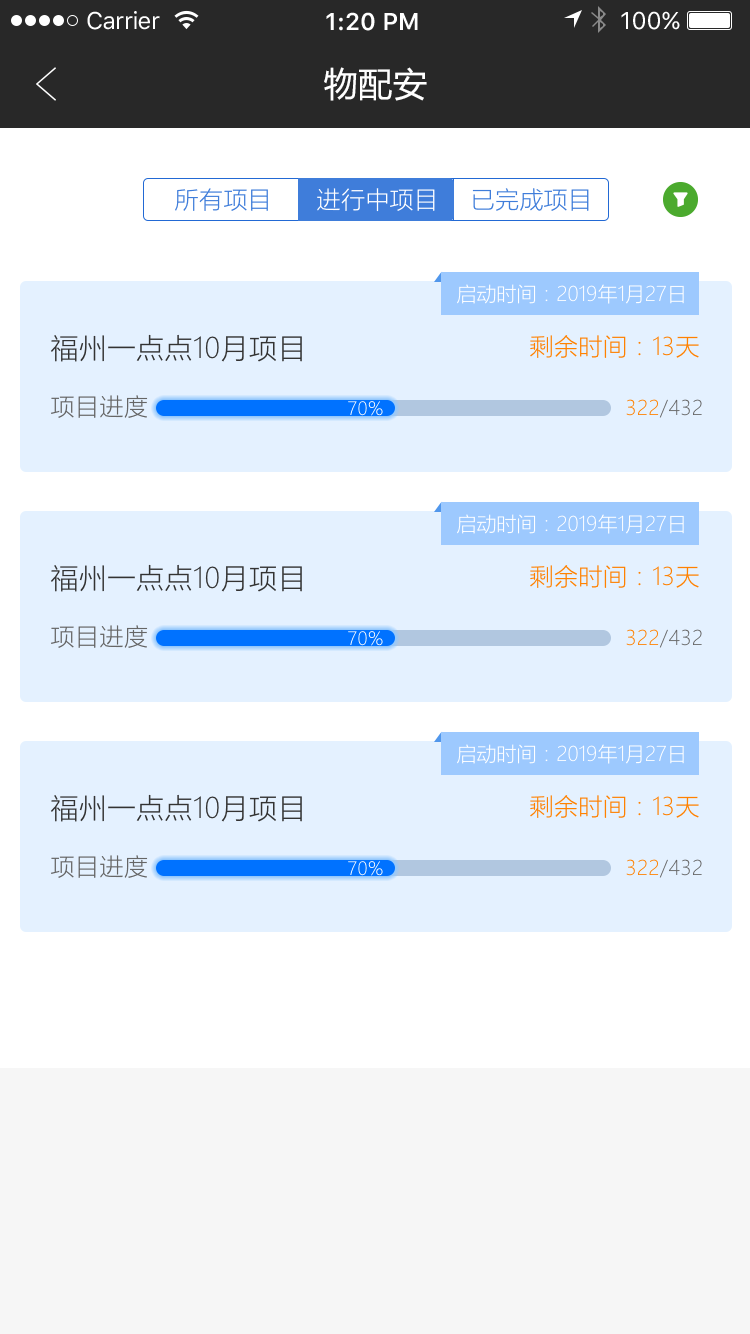
<style>
.page{position:relative;width:750px;height:1334px;background:#e4f1ff}
.page>*{position:absolute;margin:0}
.t1{font:24px "SFUIText-Regular";letter-spacing:-0.025em;color:#ffffff}
.t2{font:24px "SFUIText-Semibold";color:#ffffff}
.t3{font:24px "SFUIText-Regular";color:#ffffff}
.t4{font:34px "MicrosoftYaHei";letter-spacing:0.02em;color:#ffffff}
.t5{font:24px "MicrosoftYaHeiLight";letter-spacing:0.02em;color:#3f7dda}
.t6{font:24px "MicrosoftYaHeiLight";letter-spacing:0.02em;color:#ffffff}
.t7{font:20px "MicrosoftYaHeiLight";color:#ffffff}
.t8{font:28px "MicrosoftYaHeiLight";letter-spacing:0.02em;color:#333333}
.t9{font:24px "MicrosoftYaHeiLight";letter-spacing:0.02em;color:#ff8100}
.t10{font:24px "MicrosoftYaHeiLight";letter-spacing:0.02em;color:#666666}
.t11{font:18px "MicrosoftYaHeiLight";letter-spacing:0.02em}
.t12{font:20px "MicrosoftYaHeiLight";letter-spacing:0.02em;color:#666666}
.t13{font:20px "MicrosoftYaHeiLight";letter-spacing:0.02em;color:#ff8100}
</style>
<div class="page">
<p class="t1" style="left:87px;top:11px;width:73px;height:19px">Carrier</p>
<p class="t2" style="left:326px;top:12px;width:92px;height:19px">1:20 PM</p>
<p class="t3" style="left:621px;top:11px;width:59px;height:19px">100%</p>
<p class="t4" style="left:324px;top:67px;width:103px;height:34px">物配安</p>
<p class="t5" style="left:175px;top:188px;width:93px;height:23px">所有项目</p>
<p class="t6" style="left:317px;top:188px;width:118px;height:24px">进行中项目</p>
<p class="t5" style="left:472px;top:188px;width:117px;height:23px">已完成项目</p>
<p class="t7" style="left:457px;top:284px;width:227px;height:20px">启动时间：2019年1月27日</p>
<p class="t8" style="left:51px;top:334px;width:251px;height:28px">福州一点点10月项目</p>
<p class="t9" style="left:530px;top:335px;width:169px;height:23px">剩余时间：13天</p>
<p class="t10" style="left:51px;top:395px;width:97px;height:23px">项目进度</p>
<p class="t11" style="left:348px;top:401px;width:35px;height:15px">70%</p>
<p class="t12" style="left:626px;top:399px;width:76px;height:19px"><span class="t13">322</span>/432</p>
<p class="t7" style="left:457px;top:514px;width:227px;height:20px">启动时间：2019年1月27日</p>
<p class="t8" style="left:51px;top:564px;width:251px;height:28px">福州一点点10月项目</p>
<p class="t9" style="left:530px;top:565px;width:169px;height:23px">剩余时间：13天</p>
<p class="t10" style="left:51px;top:625px;width:97px;height:23px">项目进度</p>
<p class="t12" style="left:626px;top:629px;width:76px;height:19px"><span class="t13">322</span>/432</p>
<p class="t11" style="left:348px;top:631px;width:35px;height:15px">70%</p>
<p class="t7" style="left:457px;top:744px;width:227px;height:20px">启动时间：2019年1月27日</p>
<p class="t8" style="left:51px;top:794px;width:251px;height:28px">福州一点点10月项目</p>
<p class="t9" style="left:530px;top:795px;width:169px;height:23px">剩余时间：13天</p>
<p class="t10" style="left:51px;top:855px;width:97px;height:23px">项目进度</p>
<p class="t11" style="left:348px;top:861px;width:35px;height:15px">70%</p>
<p class="t12" style="left:626px;top:859px;width:76px;height:19px"><span class="t13">322</span>/432</p>
</div>
